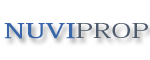
<style>
.page{position:relative;width:150px;height:60px;background:#ffffff}
.page>*{position:absolute;margin:0}
.t1{font:20px "AdobeKaitiStd-Regular";color:#2455a0;font-weight:bold;scale:1.44 1}
.t2{font:20px "AdobeKaitiStd-Regular";color:#3b485c;scale:1.44 1}
</style>
<div class="page">
<p class="t1" style="left:4px;top:23px;width:144px;height:16px;opacity:0.9">NUVI<span class="t2">PROP</span></p>
</div>
